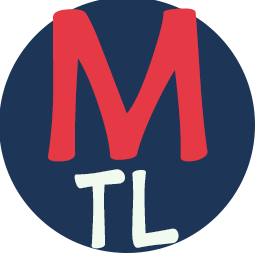
<style>
.page{position:relative;width:256px;height:256px;background:#1d3557}
.page>*{position:absolute;margin:0}
.t1{font:100px/80px "V_10CentComics";color:#f1faee}
.t2{font:200px/80px "V_10CentComics";color:#e63946}
</style>
<div class="page">
<p class="t1" style="left:48px;top:8px;width:160px;height:241px;text-align:center"><span class="t2">M<br></span>TL</p>
</div>
